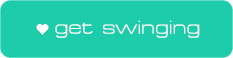
<style>
.page{position:relative;width:233px;height:58px;background:#1dccaa}
.page>*{position:absolute;margin:0}
.t1{font:18.7px "MicroExtendFLF";color:#ffffff}
</style>
<div class="page">
<p class="t1" style="left:55px;top:20px;width:145px;height:18px">get swinging</p>
</div>
